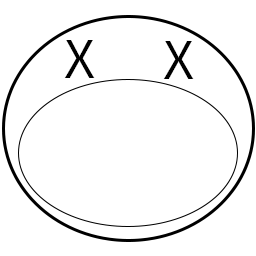
<style>
.page{position:relative;width:256px;height:256px;background:#ffffff}
.page>*{position:absolute;margin:0}
.t1{font:53.7px "Electrolize-Regular";color:#000000}
</style>
<div class="page">
<p class="t1" style="left:64px;top:40px;width:31px;height:38px">X</p>
<p class="t1" style="left:163px;top:41px;width:31px;height:38px">X</p>
</div>
